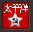
<style>
.page{position:relative;width:33px;height:32px;background:#c50000}
.page>*{position:absolute;margin:0}
.t1{font:10.4px "SimSun";letter-spacing:-0.25em;color:#ffffff}
</style>
<div class="page">
<p class="t1" style="left:4px;top:4px;width:24px;height:9px">太平洋</p>
</div>
